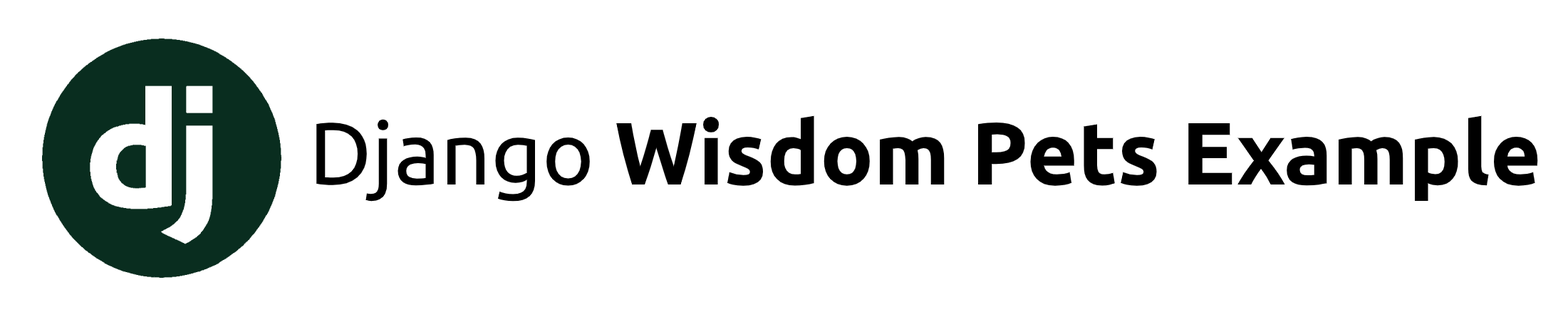
<style>
.page{position:relative;width:1568px;height:312px;background:#ffffff}
.page>*{position:absolute;margin:0}
.t1{font:88.3px "Ubuntu-Bold";color:#000000}
.t2{font:88.3px "Ubuntu-Regular";color:#000000}
</style>
<div class="page">
<p class="t1" style="left:316px;top:115px;width:1222px;height:87px"><span class="t2">Django </span>Wisdom Pets Example</p>
</div>
